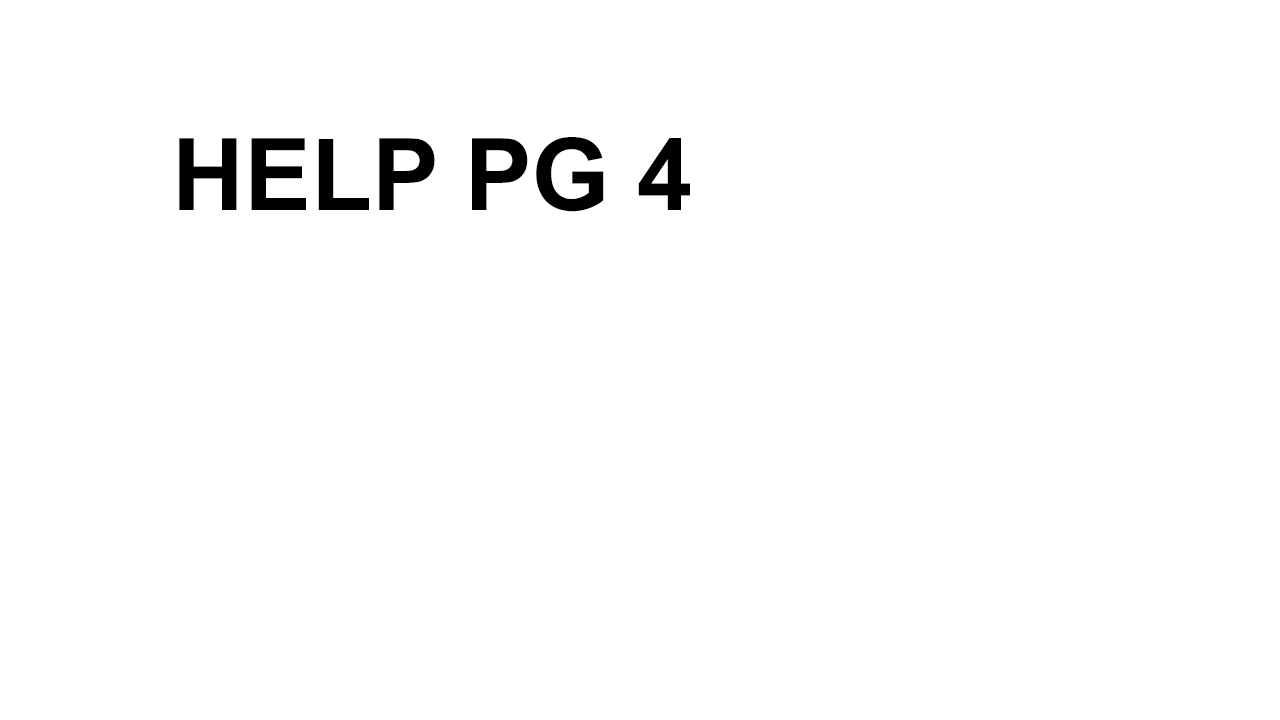
<style>
.page{position:relative;width:1280px;height:720px;background:#ffffff}
.page>*{position:absolute;margin:0}
.t1{font:100px "Arial-BoldMT";color:#000000}
</style>
<div class="page">
<p class="t1" style="left:179px;top:137px;width:511px;height:75px">HELP PG 4</p>
</div>
